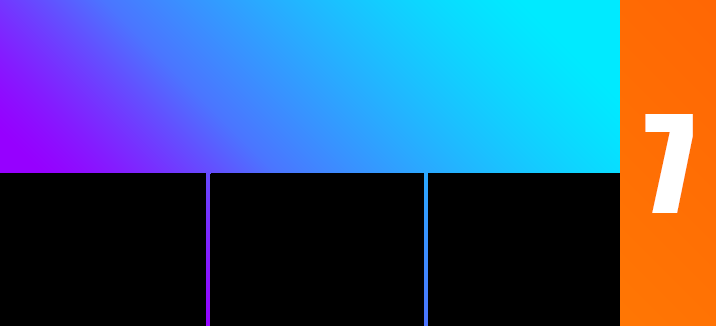
<style>
.page{position:relative;width:716px;height:326px;background:#000000}
.page>*{position:absolute;margin:0}
.t1{font:125px "Impact";color:#ffffff}
</style>
<div class="page">
<p class="t1" style="left:645px;top:114px;width:48px;height:99px">7</p>
</div>
